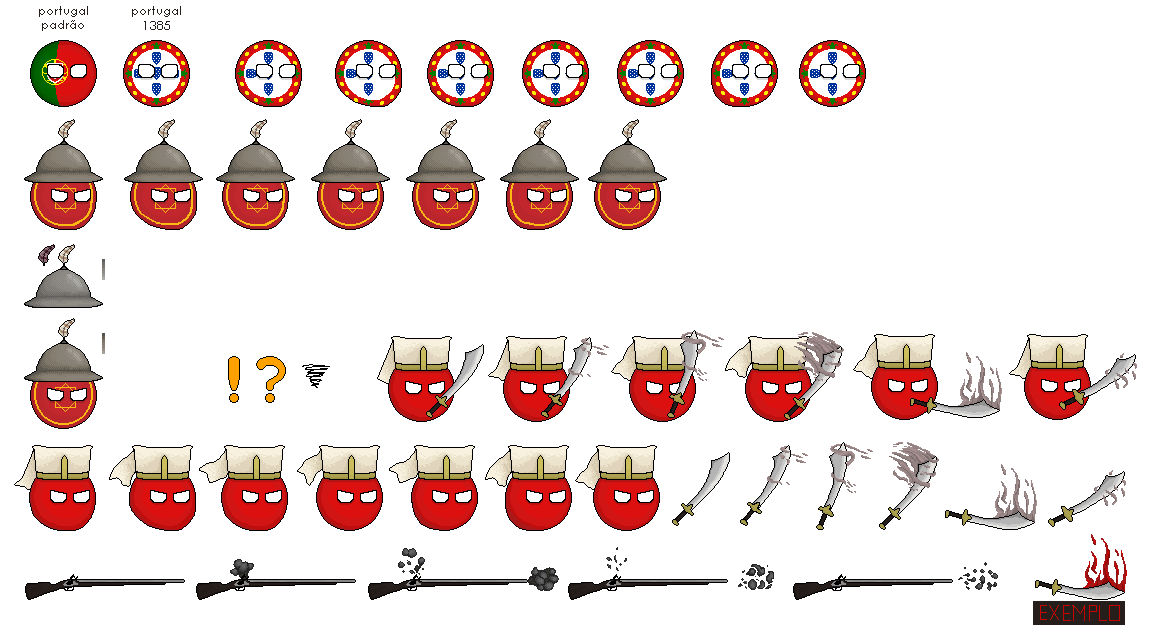
<style>
.page{position:relative;width:1153px;height:627px;background:#ffffff}
.page>*{position:absolute;margin:0}
.t1{font:12px "CenturyGothic";color:#261e1b}
</style>
<div class="page">
<p class="t1" style="left:39px;top:6px;width:49px;height:25px;text-align:center">portugal padrão</p>
<p class="t1" style="left:132px;top:6px;width:49px;height:24px;text-align:center">portugal 1385</p>
</div>
